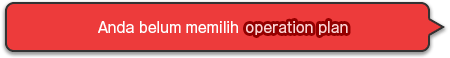
<style>
.page{position:relative;width:450px;height:58px;background:#ed3b3b}
.page>*{position:absolute;margin:0}
.t1{font:14px "GothicMB101Pro-Regular"}
.t2{font:14px "GothicMB101Pro-Regular";color:#ffffff}
</style>
<div class="page">
<p class="t1" style="left:52px;top:21px;width:327px;height:14px">You have not selected the operation plan yet.</p>
<p class="t2" style="left:98px;top:21px;width:140px;height:12px">Anda belum memilih</p>
</div>
